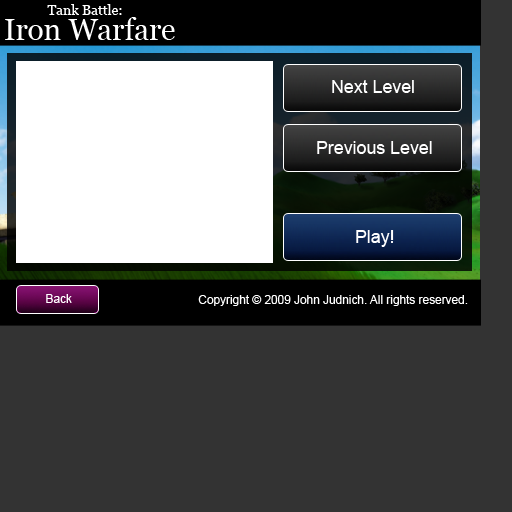
<style>
.page{position:relative;width:512px;height:512px;background:#333333}
.page>*{position:absolute;margin:0}
.t1{font:13.8px "Georgia";color:#ffffff}
.t2{font:29.6px "Georgia";color:#ffffff}
.t3{font:17.8px "ArialMT";color:#ffffff}
.t4{font:11.9px "ArialMT";color:#ffffff}
</style>
<div class="page">
<p class="t1" style="left:47px;top:4px;width:75px;height:11px">Tank Battle:</p>
<p class="t2" style="left:5px;top:17px;width:170px;height:23px">Iron Warfare</p>
<p class="t3" style="left:332px;top:80px;width:82px;height:13px">Next Level</p>
<p class="t3" style="left:317px;top:141px;width:115px;height:13px">Previous Level</p>
<p class="t3" style="left:356px;top:230px;width:38px;height:17px">Play!</p>
<p class="t4" style="left:46px;top:294px;width:26px;height:9px">Back</p>
<p class="t4" style="left:198px;top:295px;width:270px;height:11px">Copyright © 2009 John Judnich. All rights reserved.</p>
</div>
